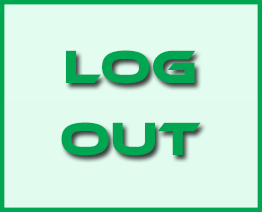
<style>
.page{position:relative;width:262px;height:212px;background:#e1fcee}
.page>*{position:absolute;margin:0}
.t1{font:48px/72px "EthnocentricRg-Regular";color:#00a651}
</style>
<div class="page">
<p class="t1" style="left:61px;top:50px;width:140px;height:106px;text-align:center">Log<br>out</p>
</div>
